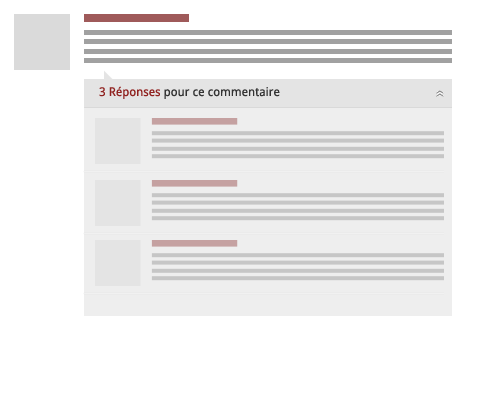
<style>
.page{position:relative;width:500px;height:400px;background:#ffffff}
.page>*{position:absolute;margin:0}
.t1{font:12px "DroidSans";color:#333333}
.t2{font:12px "DroidSans";color:#902220}
</style>
<div class="page">
<p class="t1" style="left:99px;top:86px;width:181px;height:13px"><span class="t2">3 Réponses</span> pour ce commentaire</p>
</div>
